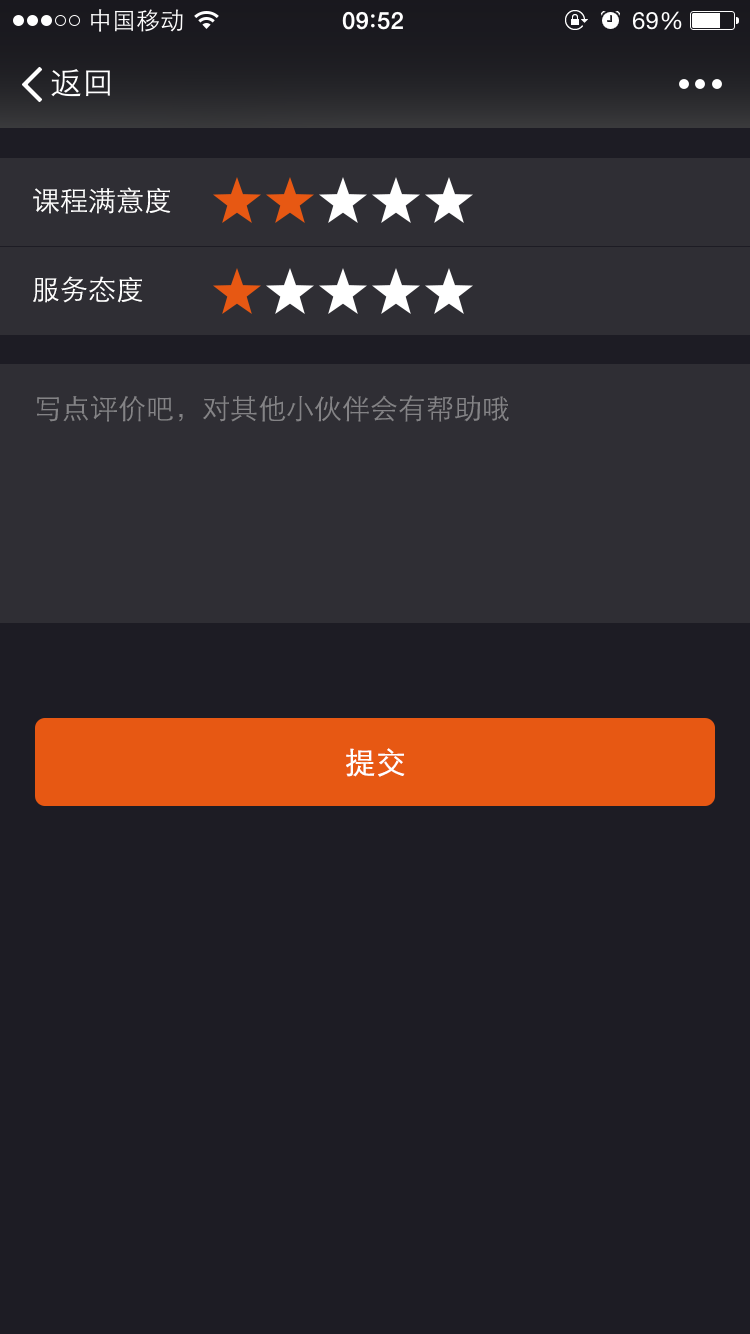
<style>
.page{position:relative;width:750px;height:1334px;background:#1d1c24}
.page>*{position:absolute;margin:0}
.t1{font:28px "STXihei";color:#ffffff}
.t2{font:28px "STXihei";color:#848386}
.t3{font:30px "STXihei";color:#ffffff;font-weight:bold}
</style>
<div class="page">
<p class="t1" style="left:33px;top:187px;width:138px;height:27px">课程满意度</p>
<p class="t1" style="left:33px;top:276px;width:110px;height:27px">服务态度</p>
<p class="t2" style="left:37px;top:395px;width:472px;height:27px">写点评价吧，对其他小伙伴会有帮助哦</p>
<p class="t3" style="left:346px;top:748px;width:59px;height:29px">提交</p>
</div>
